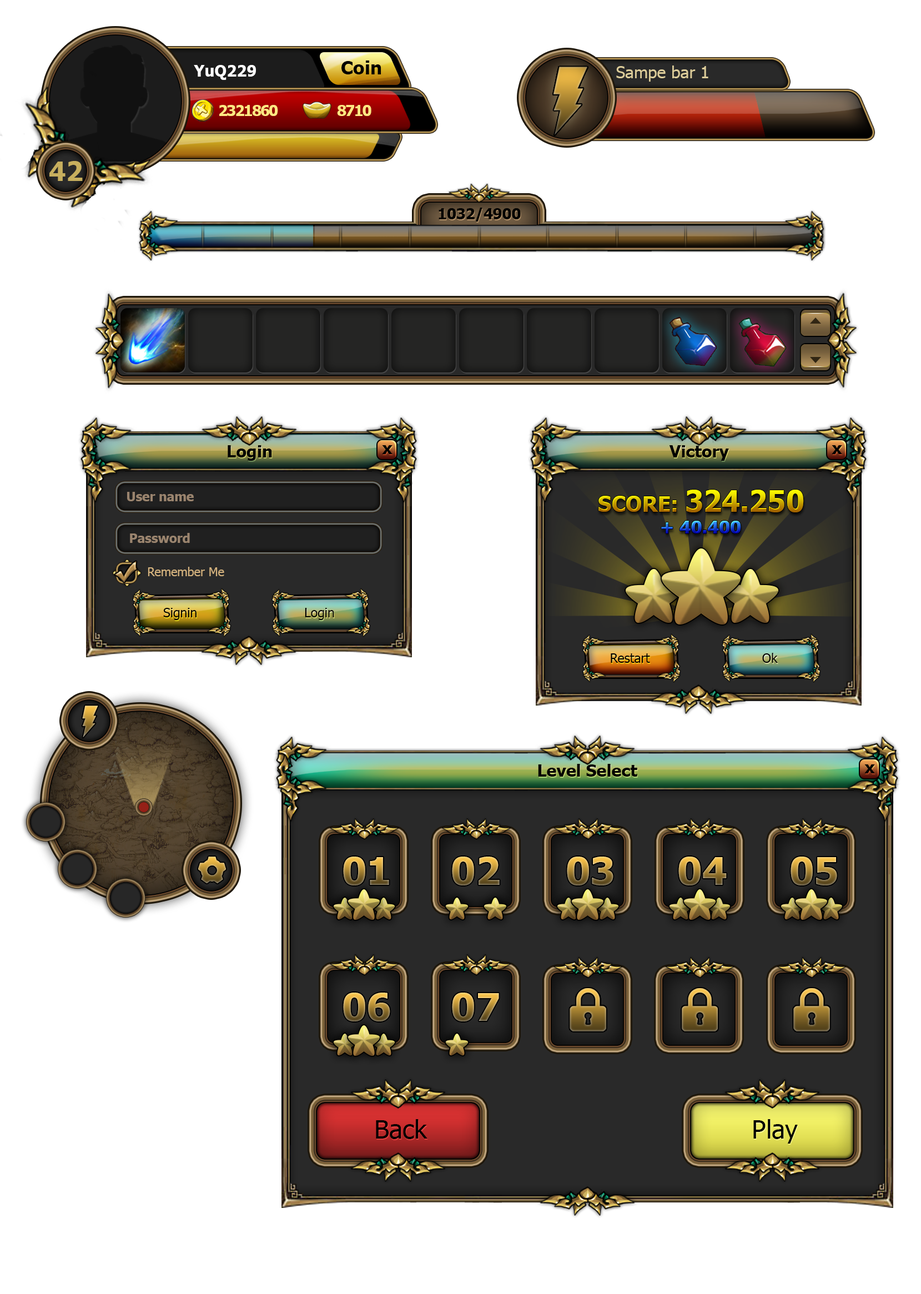
<style>
.page{position:relative;width:921px;height:1294px;background:#ffffff}
.page>*{position:absolute;margin:0}
.t1{font:15.9px "Tahoma-Bold";color:#ffffff}
.t2{font:18.4px "Tahoma-Bold";color:#000000}
.t3{font:16.9px "Tahoma";color:#ddcd9a}
.t4{font:15.2px "Tahoma-Bold";letter-spacing:-0.075em;color:#ffe782}
.t5{font:26.7px "Tahoma-Bold";color:#c7af5e}
.t6{font:14.8px "Tahoma-Bold";color:#000000}
.t7{font:16.7px "Tahoma-Bold";color:#000000}
.t8{font:12.6px "Tahoma-Bold";color:#9a846e}
.t9{font:29.3px "Tahoma-Bold"}
.t10{font:21.7px "Tahoma-Bold";text-transform:uppercase}
.t11{font:21.7px "Tahoma-Bold"}
.t12{font:18px "Tahoma-Bold";text-transform:uppercase}
.t13{font:12.3px "Tahoma";color:#d6b47f}
.t14{font:12.6px "Tahoma";color:#000000}
.t15{font:38.4px "Tahoma-Bold"}
.t16{font:25.6px "Tahoma";color:#000000}
</style>
<div class="page">
<p class="t1" style="left:194px;top:65px;width:62px;height:15px">YuQ229</p>
<p class="t2" style="left:342px;top:61px;width:39px;height:13px">Coin</p>
<p class="t3" style="left:616px;top:66px;width:93px;height:16px">Sampe bar 1</p>
<p class="t4" style="left:219px;top:105px;width:59px;height:11px">2321860</p>
<p class="t4" style="left:337px;top:105px;width:34px;height:11px">8710</p>
<p class="t5" style="left:49px;top:161px;width:34px;height:20px">42</p>
<p class="t6" style="left:439px;top:208px;width:82px;height:14px">1032/4900</p>
<p class="t7" style="left:228px;top:445px;width:44px;height:16px">Login</p>
<p class="t7" style="left:382px;top:445px;width:11px;height:9px">x</p>
<p class="t7" style="left:669px;top:445px;width:60px;height:16px">Victory</p>
<p class="t7" style="left:832px;top:445px;width:10px;height:9px">x</p>
<p class="t8" style="left:127px;top:492px;width:67px;height:9px">User name</p>
<p class="t9" style="left:599px;top:490px;width:205px;height:23px"><span class="t10">Score</span><span class="t11">: </span>324.250</p>
<p class="t12" style="left:661px;top:521px;width:80px;height:13px">+ 40.400</p>
<p class="t8" style="left:130px;top:533px;width:60px;height:10px">Password</p>
<p class="t13" style="left:148px;top:567px;width:76px;height:9px">Remember Me</p>
<p class="t14" style="left:163px;top:608px;width:34px;height:12px">Signin</p>
<p class="t14" style="left:305px;top:608px;width:29px;height:12px">Login</p>
<p class="t14" style="left:611px;top:654px;width:39px;height:9px">Restart</p>
<p class="t14" style="left:762px;top:653px;width:16px;height:10px">Ok</p>
<p class="t7" style="left:538px;top:764px;width:99px;height:13px">Level Select</p>
<p class="t7" style="left:865px;top:765px;width:10px;height:9px">x</p>
<p class="t15" style="left:343px;top:857px;width:46px;height:29px">01</p>
<p class="t15" style="left:452px;top:857px;width:48px;height:29px">02</p>
<p class="t15" style="left:567px;top:857px;width:47px;height:29px">03</p>
<p class="t15" style="left:679px;top:857px;width:48px;height:29px">04</p>
<p class="t15" style="left:791px;top:857px;width:46px;height:29px">05</p>
<p class="t15" style="left:343px;top:993px;width:47px;height:29px">06</p>
<p class="t15" style="left:452px;top:993px;width:47px;height:29px">07</p>
<p class="t16" style="left:376px;top:1119px;width:52px;height:20px">Back</p>
<p class="t16" style="left:754px;top:1119px;width:44px;height:25px">Play</p>
</div>
